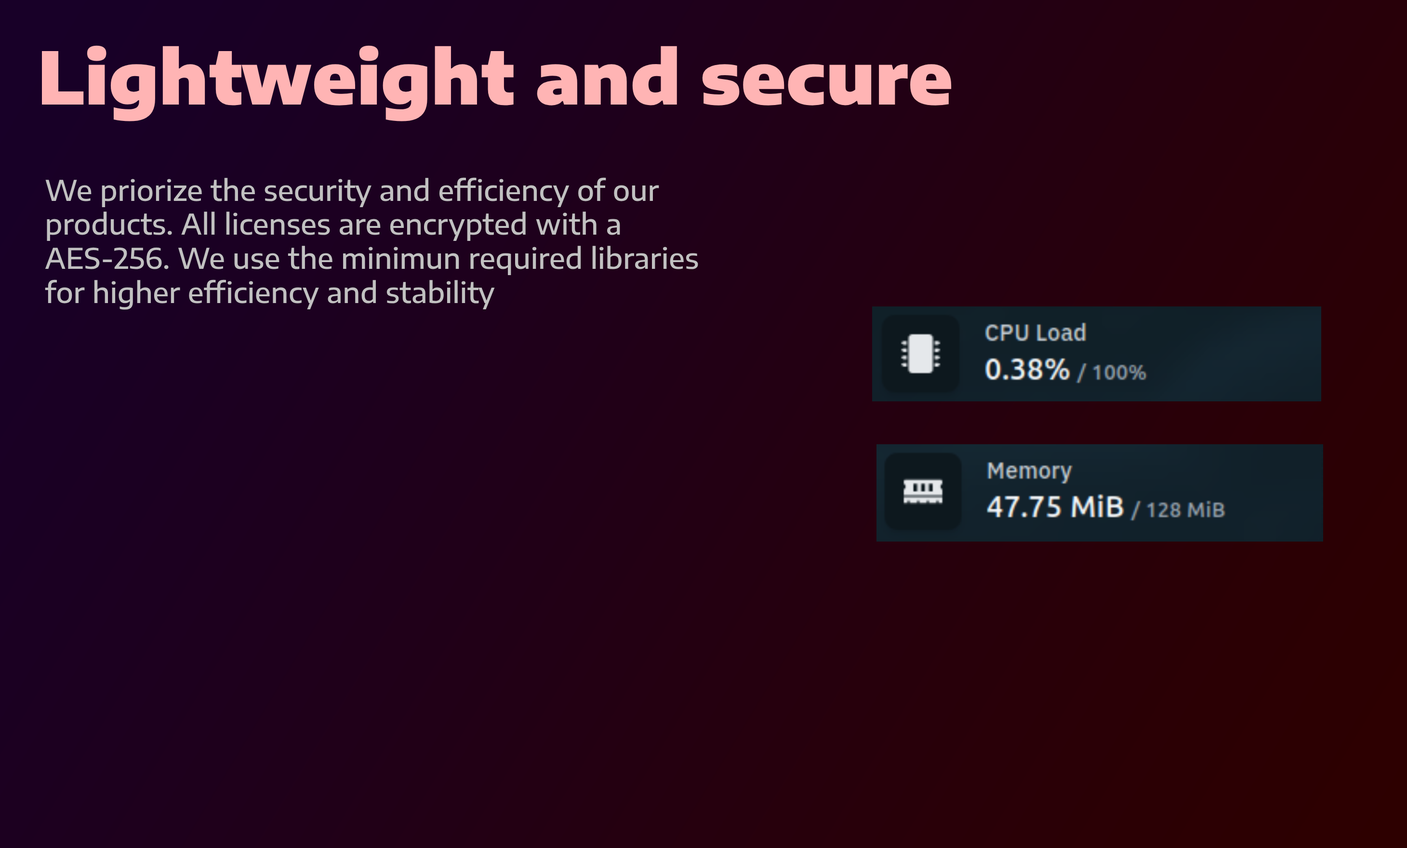
<style>
.page{position:relative;width:1407px;height:848px}
.page>*{position:absolute;margin:0}
.t1{font:72.3px "EncodeSansSemiExpanded-Black";color:#ffb4b4}
.t2{font:28.4px "EncodeSansSemiExpanded-Medium";color:#c1c1c1}
</style>
<div class="page">
<p class="t1" style="left:42px;top:45px;width:909px;height:76px">Lightweight and secure</p>
<p class="t2" style="left:45px;top:177px;width:653px;height:133px">We priorize the security and efficiency of our products. All licenses are encrypted with a AES-256. We use the minimun required libraries for higher efficiency and stability</p>
</div>
